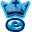
<style>
.page{position:relative;width:32px;height:32px;background:#ffffff}
.page>*{position:absolute;margin:0}
.t1{font:18.1px "BlackoakStd";scale:0.68 1}
</style>
<div class="page">
<p class="t1" style="left:7px;top:20px;width:16px;height:10px">e</p>
</div>
